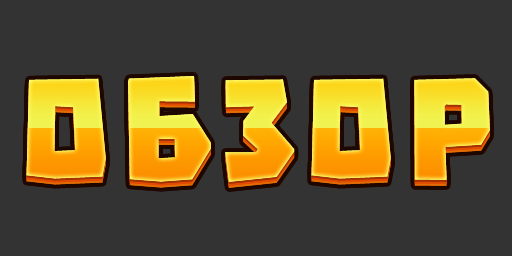
<style>
.page{position:relative;width:512px;height:256px;background:#333333}
.page>*{position:absolute;margin:0}
.t1{font:161.3px "Troika";letter-spacing:0.06em}
</style>
<div class="page">
<p class="t1" style="left:26px;top:76px;width:464px;height:106px">ОБЗОР</p>
</div>
